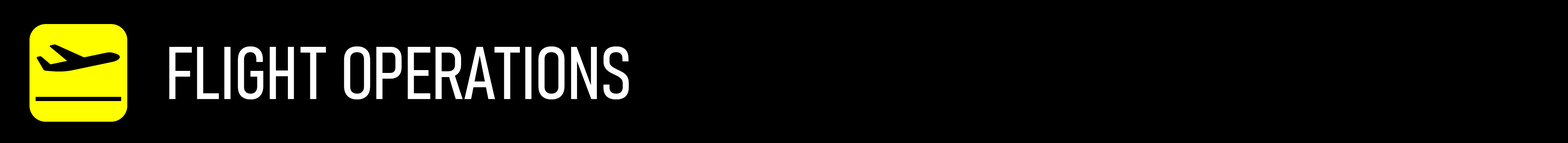
<style>
.page{position:relative;width:1568px;height:143px;background:#000000}
.page>*{position:absolute;margin:0}
.t1{font:73.5px "Bahnschrift-SemiLightCondensed";color:#ffffff}
</style>
<div class="page">
<p class="t1" style="left:169px;top:47px;width:460px;height:53px">FLIGHT OPERATIONS</p>
</div>
